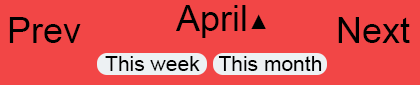
<style>
.page{position:relative;width:420px;height:85px;background:#f24646}
.page>*{position:absolute;margin:0}
.t1{font:36px "ArialMT";color:#000000}
.t2{font:21px "ArialMT";color:#000000}
</style>
<div class="page">
<p class="t1" style="left:176px;top:5px;width:70px;height:33px">April</p>
<p class="t1" style="left:9px;top:17px;width:72px;height:26px">Prev</p>
<p class="t2" style="left:251px;top:14px;width:15px;height:15px">▲</p>
<p class="t1" style="left:338px;top:17px;width:72px;height:26px">Next</p>
<p class="t2" style="left:105px;top:56px;width:95px;height:15px">This week</p>
<p class="t2" style="left:218px;top:56px;width:104px;height:15px">This month</p>
</div>
